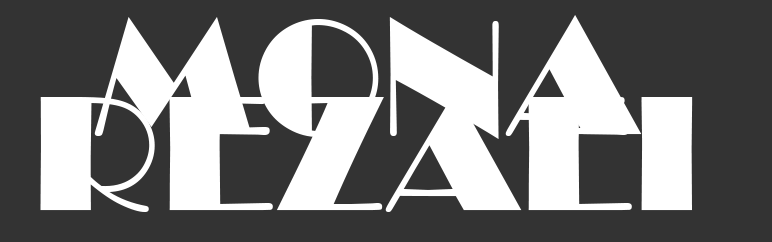
<style>
.page{position:relative;width:772px;height:242px;background:#333333}
.page>*{position:absolute;margin:0}
.t1{font:169px "Broadway";color:#ffffff}
</style>
<div class="page">
<p class="t1" style="left:40px;top:15px;width:653px;height:197px">MONA REZAEI</p>
</div>
